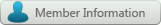
<style>
.page{position:relative;width:161px;height:25px}
.page>*{position:absolute;margin:0}
.t1{font:12px "SegoeUI";color:#706d6d}
</style>
<div class="page">
<p class="t1" style="left:35px;top:8px;width:110px;height:9px">Member Information</p>
</div>
